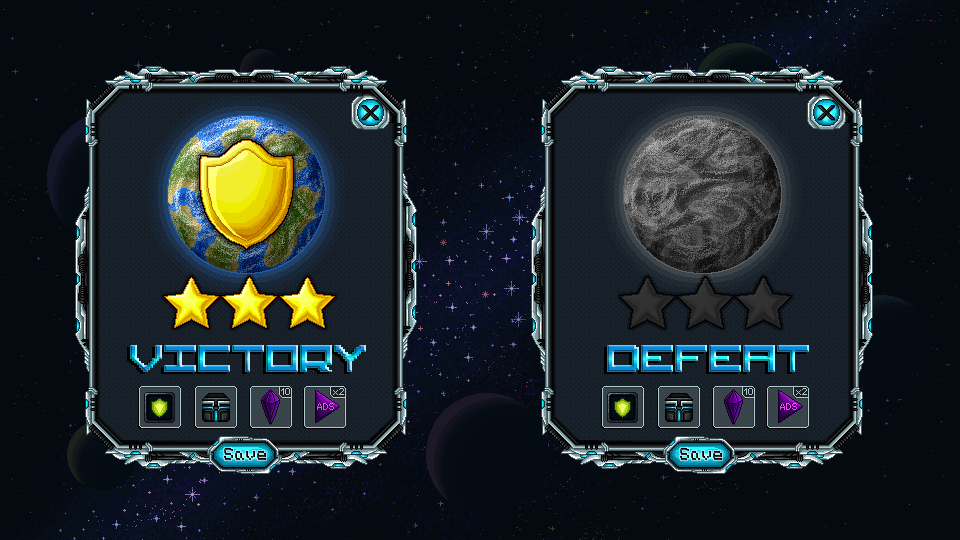
<style>
.page{position:relative;width:960px;height:540px;background:#050a10}
.page>*{position:absolute;margin:0}
.t1{font:36px "Viper"}
.t2{font:10px "ArialMT";letter-spacing:-0.1em;color:#b2cbcf}
.t3{font:10px "ArialMT";letter-spacing:0.1em;color:#b2cbcf}
.t4{font:14px "untitled-regular"}
</style>
<div class="page">
<p class="t1" style="left:130px;top:345px;width:236px;height:27px">VICTORY</p>
<p class="t1" style="left:607px;top:345px;width:202px;height:27px">DEFEAT</p>
<p class="t2" style="left:281px;top:388px;width:9px;height:7px">10</p>
<p class="t3" style="left:333px;top:388px;width:11px;height:7px">x2</p>
<p class="t2" style="left:744px;top:388px;width:9px;height:7px">10</p>
<p class="t3" style="left:796px;top:388px;width:11px;height:7px">x2</p>
<p class="t4" style="left:224px;top:448px;width:42px;height:12px">Save</p>
<p class="t4" style="left:680px;top:448px;width:42px;height:12px">Save</p>
</div>
